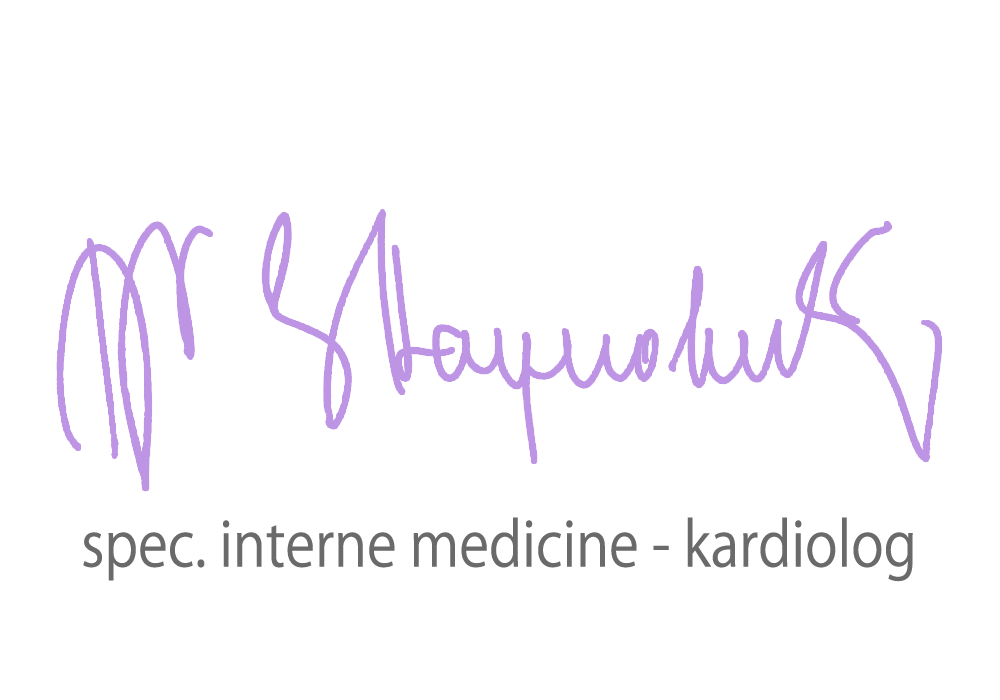
<style>
.page{position:relative;width:1000px;height:700px;background:#ffffff}
.page>*{position:absolute;margin:0}
.t1{font:105px "KozGoPr6N-Regular";color:#6a6a6a;scale:0.9 1}
</style>
<div class="page">
<p class="t1" style="left:83px;top:517px;width:830px;height:65px">spec. interne medicine - kardiolog</p>
</div>
